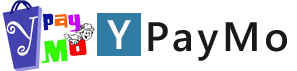
<style>
.page{position:relative;width:297px;height:71px;background:#ffffff}
.page>*{position:absolute;margin:0}
.t1{font:41px "SegoeUI-Semibold";letter-spacing:0.1em;color:#ffffff}
.t2{font:41px "SegoeUI-Semibold";letter-spacing:0.1em;color:#191919}
</style>
<div class="page">
<p class="t1" style="left:107px;top:20px;width:24px;height:29px">Y</p>
<p class="t2" style="left:148px;top:22px;width:139px;height:39px">PayMo</p>
</div>
